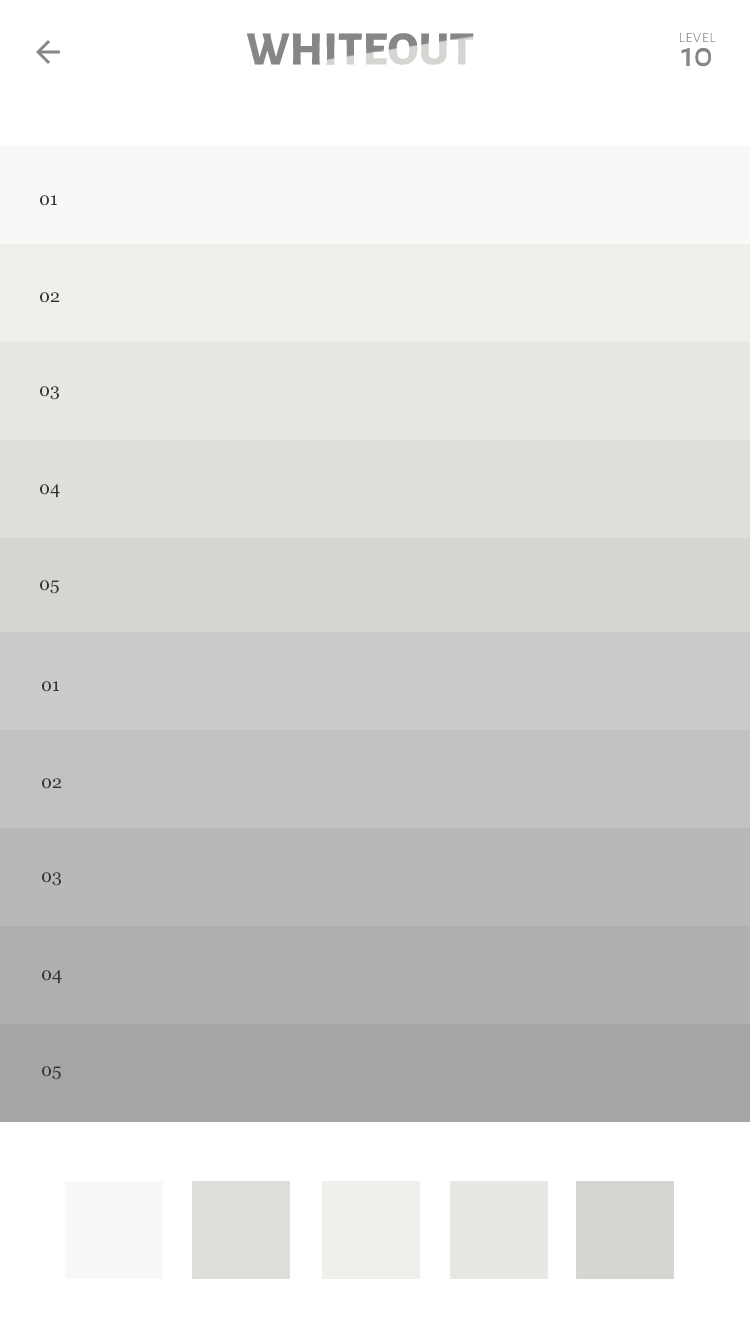
<style>
.page{position:relative;width:750px;height:1334px;background:#ffffff}
.page>*{position:absolute;margin:0}
.t1{font:48px "AlegreyaSansSC-ExtraBold"}
.t2{font:48px "AlegreyaSansSC-ExtraBold";color:#868684}
.t3{font:18px/24px "AlegreyaSansSC-Light";color:#868684}
.t4{font:36px/24px "AlegreyaSansSC-Medium";color:#868684}
.t5{font:18px "Georgia";color:#333333}
</style>
<div class="page">
<p class="t1" style="left:246px;top:33px;width:228px;height:32px">WHITEOUT</p>
<p class="t2" style="left:246px;top:33px;width:228px;height:32px">WHITEOUT</p>
<p class="t3" style="left:680px;top:33px;width:36px;height:34px;text-align:center">level<br><span class="t4">10</span></p>
<p class="t5" style="left:40px;top:195px;width:17px;height:11px">01</p>
<p class="t5" style="left:40px;top:292px;width:20px;height:11px">02</p>
<p class="t5" style="left:40px;top:386px;width:19px;height:14px">03</p>
<p class="t5" style="left:40px;top:484px;width:20px;height:14px">04</p>
<p class="t5" style="left:40px;top:580px;width:19px;height:14px">05</p>
<p class="t5" style="left:42px;top:681px;width:17px;height:11px">01</p>
<p class="t5" style="left:42px;top:778px;width:20px;height:11px">02</p>
<p class="t5" style="left:42px;top:872px;width:19px;height:14px">03</p>
<p class="t5" style="left:42px;top:970px;width:20px;height:14px">04</p>
<p class="t5" style="left:42px;top:1066px;width:19px;height:14px">05</p>
</div>
